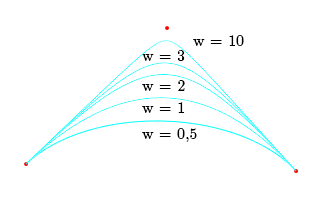
<style>
.page{position:relative;width:318px;height:207px;background:#ffffff}
.page>*{position:absolute;margin:0}
.t1{font:12px "LatinModernMath-Regular";color:#000000}
</style>
<div class="page">
<p class="t1" style="left:193px;top:35px;width:51px;height:11px">w = 10</p>
<p class="t1" style="left:142px;top:50px;width:43px;height:11px">w = 3</p>
<p class="t1" style="left:142px;top:80px;width:43px;height:11px">w = 2</p>
<p class="t1" style="left:142px;top:102px;width:43px;height:11px">w = 1</p>
<p class="t1" style="left:142px;top:128px;width:55px;height:14px">w = 0,5</p>
</div>
